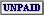
<style>
.page{position:relative;width:44px;height:15px;background:#d4d1d1}
.page>*{position:absolute;margin:0}
.t1{font:10px "TimesNewRomanPS-BoldMT"}
</style>
<div class="page">
<p class="t1" style="left:3px;top:4px;width:37px;height:7px">UNPAID</p>
</div>
